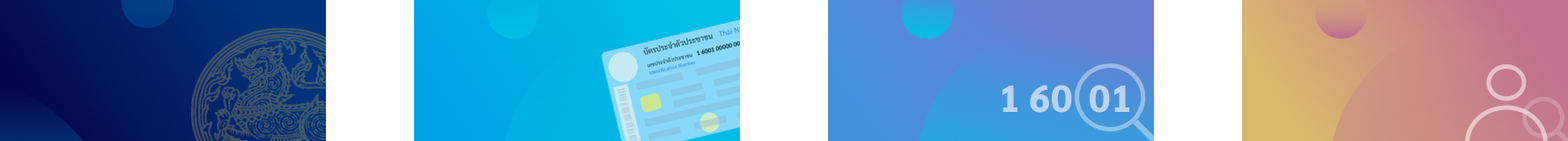
<style>
.page{position:relative;width:1568px;height:141px}
.page>*{position:absolute;margin:0}
.t1{font:37.6px "Sarabun-ExtraBold"}
</style>
<div class="page">
<p class="t1" style="left:1002px;top:85px;width:220px;height:28px">1 60  01   000</p>
</div>
